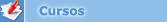
<style>
.page{position:relative;width:167px;height:22px;background:#8fbee8}
.page>*{position:absolute;margin:0}
.t1{font:12px "Verdana-Bold";color:#5292cc}
</style>
<div class="page">
<p class="t1" style="left:39px;top:6px;width:46px;height:10px">Cursos</p>
</div>
